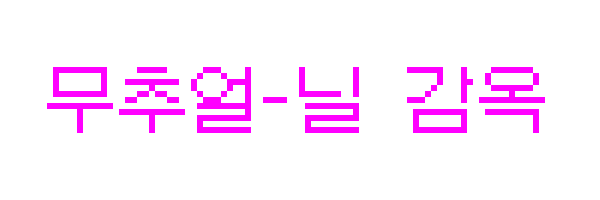
<style>
.page{position:relative;width:600px;height:200px;background:#ffffff}
.page>*{position:absolute;margin:0}
.t1{font:72px "GalmuriMono11-Regular";color:#ff00ff}
</style>
<div class="page">
<p class="t1" style="left:47px;top:67px;width:498px;height:66px">무추얼-닐 감옥</p>
</div>
